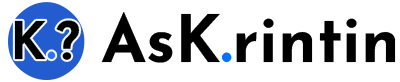
<style>
.page{position:relative;width:400px;height:82px;background:#ffffff}
.page>*{position:absolute;margin:0}
.t1{font:537.1px "JosefinSans-Bold"}
.t2{font:65.3px "JosefinSans-Bold";color:#000000}
.t3{font:65.3px "JosefinSans-Bold";color:#0072ff}
.t4{font:51.6px "JosefinSans-Bold";color:#000000}
.t5{font:51.6px "JosefinSans-Bold";color:#2c73ff}
</style>
<div class="page">
<p class="t1" style="left:8px;top:2px;width:77px;height:78px">.</p>
<p class="t2" style="left:101px;top:12px;width:295px;height:51px">AsK<span class="t3">.</span>rintin</p>
<p class="t4" style="left:14px;top:20px;width:66px;height:40px">K<span class="t5">.</span>?</p>
</div>
